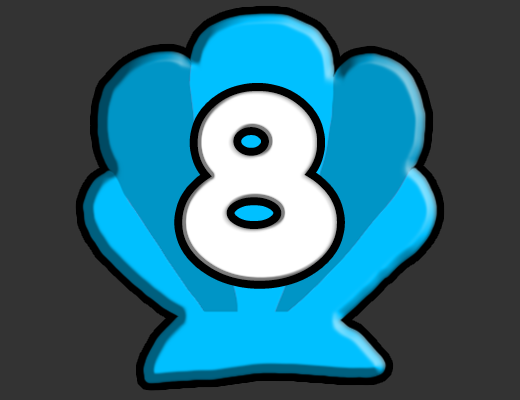
<style>
.page{position:relative;width:520px;height:400px;background:#333333}
.page>*{position:absolute;margin:0}
.t1{font:279.4px "Funhouse";color:#ffffff}
</style>
<div class="page">
<p class="t1" style="left:182px;top:91px;width:155px;height:190px">8</p>
</div>
